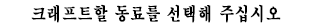
<style>
.page{position:relative;width:312px;height:28px;background:#ffffff}
.page>*{position:absolute;margin:0}
.t1{font:18px "H2mjrE";letter-spacing:0.05em;color:#000000;font-weight:bold;scale:0.8 1}
</style>
<div class="page">
<p class="t1" style="left:31px;top:4px;width:250px;height:19px">크래프트할 동료를 선택해 주십시오</p>
</div>
